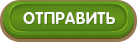
<style>
.page{position:relative;width:137px;height:42px}
.page>*{position:absolute;margin:0}
.t1{font:16px "RotondaC-Bold";letter-spacing:0.04em;color:#ffffff;text-transform:uppercase}
</style>
<div class="page">
<p class="t1" style="left:23px;top:12px;width:92px;height:12px">Отправить</p>
</div>
